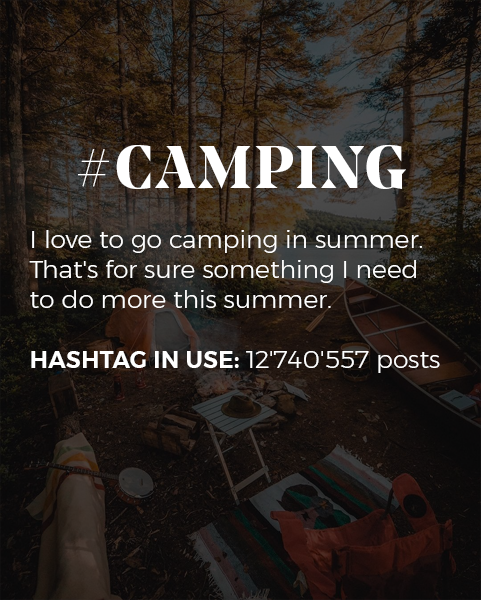
<style>
.page{position:relative;width:481px;height:600px}
.page>*{position:absolute;margin:0}
.t1{font:25px "Montserrat-Light";color:#ffffff}
.t2{font:60px/35px "NoeDisplay-Bold";letter-spacing:0.05em;color:#ffffff;text-transform:uppercase}
.t3{font:23px "Montserrat-SemiBold";letter-spacing:0.02em;color:#ffffff;text-transform:uppercase}
</style>
<div class="page">
<p class="t1" style="left:29px;top:145px;width:411px;height:228px;text-align:center"><span class="t2">#camping<br></span><br>I love to go camping in summer. That's for sure something I need<br>to do more this summer.<br><br><span class="t3">Hashtag in use: </span>12'740'557 posts</p>
</div>
